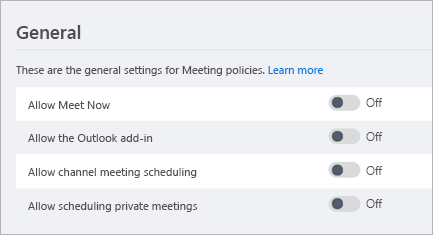
<style>
.page{position:relative;width:433px;height:235px;background:#f0f1f5}
.page>*{position:absolute;margin:0}
.t1{font:18.7px "SegoeUI-Semibold";color:#505050}
.t2{font:11.1px "SegoeUI";color:#505050}
.t3{font:11.1px "SegoeUI";color:#0078d4}
.t4{font:11.2px "SegoeUI";color:#505050}
.t5{font:11.7px "SegoeUI-Semilight";color:#505050}
</style>
<div class="page">
<p class="t1" style="left:16px;top:25px;width:65px;height:14px">General</p>
<p class="t2" style="left:16px;top:66px;width:307px;height:10px">These are the general settings for Meeting policies. <span class="t3">Learn more</span></p>
<p class="t4" style="left:28px;top:101px;width:82px;height:8px">Allow Meet Now</p>
<p class="t5" style="left:366px;top:98px;width:17px;height:9px">Off</p>
<p class="t4" style="left:28px;top:134px;width:125px;height:8px">Allow the Outlook add-in</p>
<p class="t5" style="left:366px;top:132px;width:17px;height:9px">Off</p>
<p class="t4" style="left:28px;top:168px;width:169px;height:10px">Allow channel meeting scheduling</p>
<p class="t5" style="left:366px;top:166px;width:17px;height:9px">Off</p>
<p class="t4" style="left:28px;top:202px;width:170px;height:10px">Allow scheduling private meetings</p>
<p class="t5" style="left:366px;top:199px;width:17px;height:9px">Off</p>
</div>
